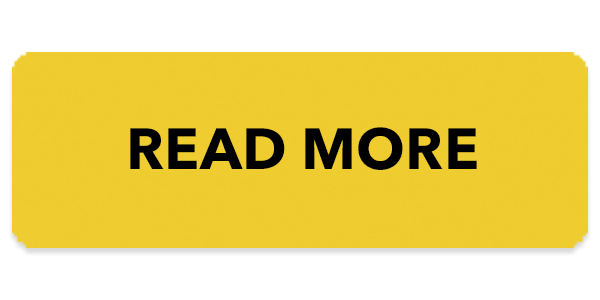
<style>
.page{position:relative;width:600px;height:300px;background:#efcd30}
.page>*{position:absolute;margin:0}
.t1{font:57.4px "AvenirNext-Bold";letter-spacing:0.005em;color:#000000}
</style>
<div class="page">
<p class="t1" style="left:130px;top:127px;width:347px;height:43px">READ MORE</p>
</div>
